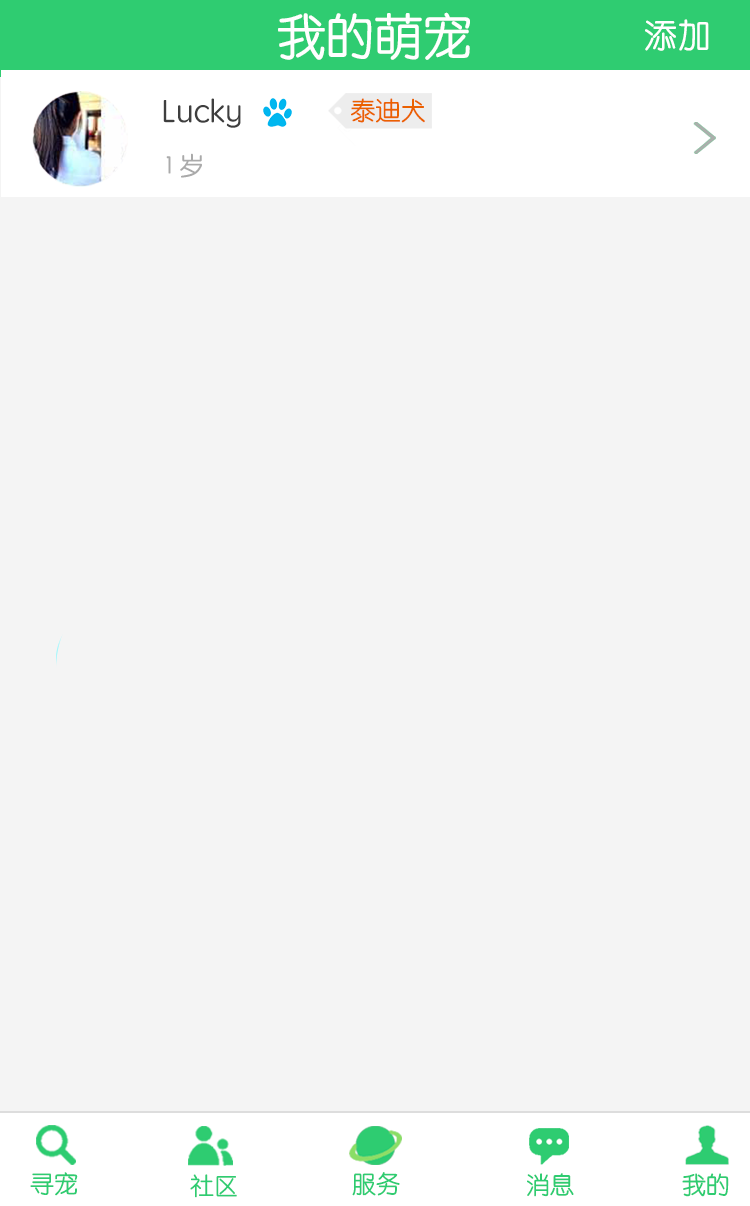
<style>
.page{position:relative;width:750px;height:1206px;background:#f4f4f4}
.page>*{position:absolute;margin:0}
.t1{font:48.7px "STYuanti-SC-Regular";color:#ffffff}
.t2{font:33px "STYuanti-SC-Regular";color:#ffffff}
.t3{font:32px "STYuanti-SC-Regular";color:#3e3e3e}
.t4{font:25px "STYuanti-SC-Regular";color:#eb6100}
.t5{font:25px "STYuanti-SC-Regular";color:#aaaaaa}
.t6{font:24px "STYuanti-SC-Regular";color:#2ecc71}
.t7{font:24px "STYuanti-SC-Regular"}
</style>
<div class="page">
<p class="t1" style="left:278px;top:12px;width:192px;height:48px">我的萌宠</p>
<p class="t2" style="left:645px;top:19px;width:64px;height:32px">添加</p>
<p class="t3" style="left:163px;top:98px;width:78px;height:30px">Lucky</p>
<p class="t4" style="left:351px;top:98px;width:74px;height:25px">泰迪犬</p>
<p class="t5" style="left:166px;top:153px;width:36px;height:25px">1 岁</p>
<p class="t6" style="left:30px;top:1172px;width:48px;height:24px">寻宠</p>
<p class="t6" style="left:190px;top:1174px;width:47px;height:24px">社区</p>
<p class="t7" style="left:352px;top:1173px;width:48px;height:24px">服务</p>
<p class="t6" style="left:352px;top:1172px;width:48px;height:24px">服务</p>
<p class="t7" style="left:526px;top:1173px;width:47px;height:24px">消息</p>
<p class="t6" style="left:527px;top:1173px;width:47px;height:24px">消息</p>
<p class="t6" style="left:682px;top:1173px;width:47px;height:24px">我的</p>
<p class="t6" style="left:682px;top:1173px;width:47px;height:24px">我的</p>
</div>
